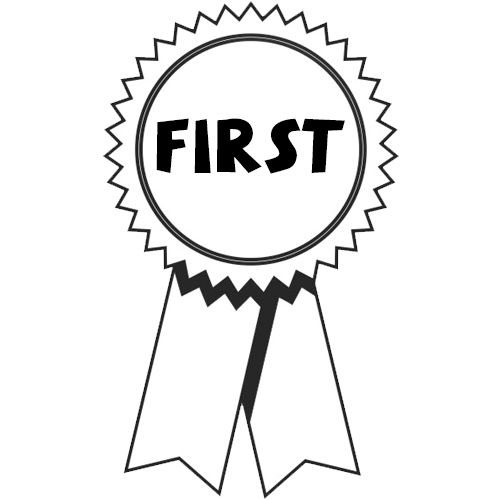
<style>
.page{position:relative;width:500px;height:500px;background:#ffffff}
.page>*{position:absolute;margin:0}
.t1{font:69.5px "THEMINION";color:#000000}
</style>
<div class="page">
<p class="t1" style="left:156px;top:118px;width:189px;height:56px">FIRST</p>
</div>
